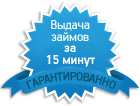
<style>
.page{position:relative;width:140px;height:106px;background:#ffffff}
.page>*{position:absolute;margin:0}
.t1{font:14.5px/11.5px "PFHandbookPro-Regular";letter-spacing:-0.02em;color:#ffffff}
.t2{font:14.5px/11.5px "PFHandbookPro-Bold";letter-spacing:-0.02em;color:#ffffff}
.t3{font:12.5px "PFHandbookPro-Medium";letter-spacing:-0.02em;color:#085977;text-transform:uppercase}
</style>
<div class="page">
<p class="t1" style="left:47px;top:20px;width:48px;height:47px;text-align:center">Выдача<br>займов<br><span class="t2">за<br>15 минут</span></p>
<p class="t3" style="left:26px;top:72px;width:90px;height:18px">гарантированно</p>
</div>
